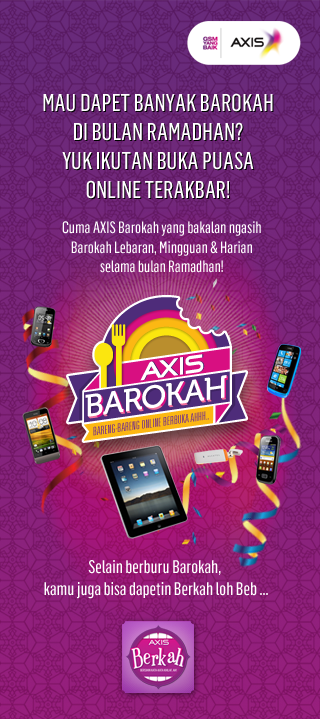
<style>
.page{position:relative;width:320px;height:719px}
.page>*{position:absolute;margin:0}
.t1{font:24px "FlamaCondensed-Basic";color:#ffffff;text-transform:uppercase}
.t2{font:24px "FlamaCondensed-Basic";text-transform:uppercase}
.t3{font:16px "FlamaCondensed-Basic";color:#ffffff}
.t4{font:18px "FlamaCondensed-Basic";color:#ffffff}
</style>
<div class="page">
<p class="t1" style="left:43px;top:93px;width:230px;height:106px;text-align:center">Mau dapet banyak Barokah <br>di bulan Ramadhan? <br>Yuk ikutan buka puasa <br>online terakbar!</p>
<p class="t2" style="left:44px;top:94px;width:230px;height:106px;text-align:center">Mau dapet banyak Barokah <br>di bulan Ramadhan? <br>Yuk ikutan buka puasa <br>online terakbar!</p>
<p class="t3" style="left:62px;top:221px;width:199px;height:52px;text-align:center">Cuma AXIS Barokah yang bakalan ngasih <br>Barokah Lebaran, Mingguan &amp; Harian <br>selama bulan Ramadhan!</p>
<p class="t4" style="left:44px;top:560px;width:224px;height:39px;text-align:center">Selain berburu Barokah, <br>kamu juga bisa dapetin Berkah loh Beb ...</p>
</div>
